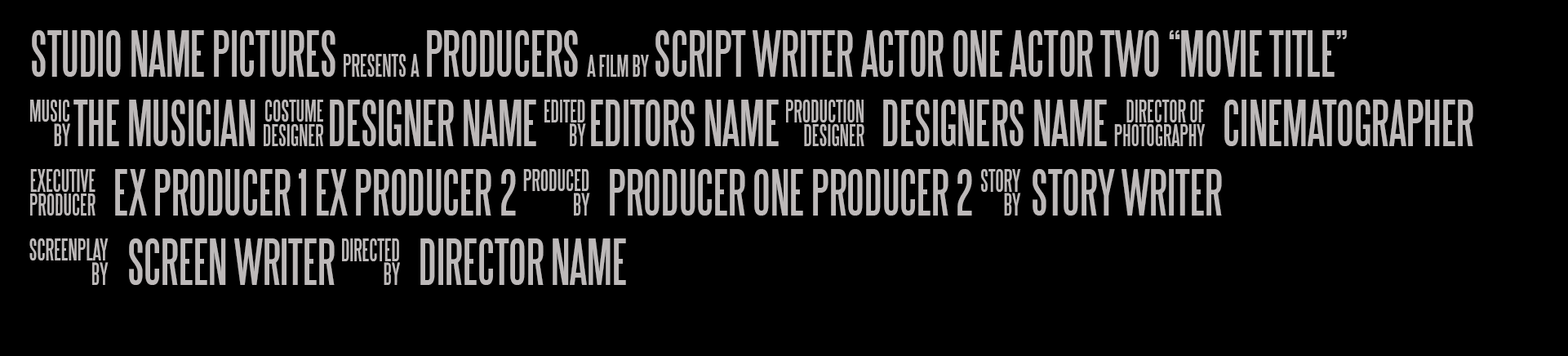
<style>
.page{position:relative;width:1568px;height:356px;background:#000000}
.page>*{position:absolute;margin:0}
.t1{font:57.8px "SteelTongs";color:#bdb9b9}
</style>
<div class="page">
<p class="t1" style="left:29px;top:30px;width:1444px;height:255px">STUDIO NAME PICTURES :%PRODUCERS *SCRIPT WRITER ACTOR ONE ACTOR TWO “MOVIE TITLE”<br>cTHE MUSICIAN dDESIGNER NAME eEDITORS NAME f  DESIGNERS NAME g  CINEMATOGRAPHER<br>p  EX PRODUCER 1 EX PRODUCER 2 j  PRODUCER ONE PRODUCER 2 m STORY WRITER<br>o  SCREEN WRITER k  DIRECTOR NAME</p>
</div>
